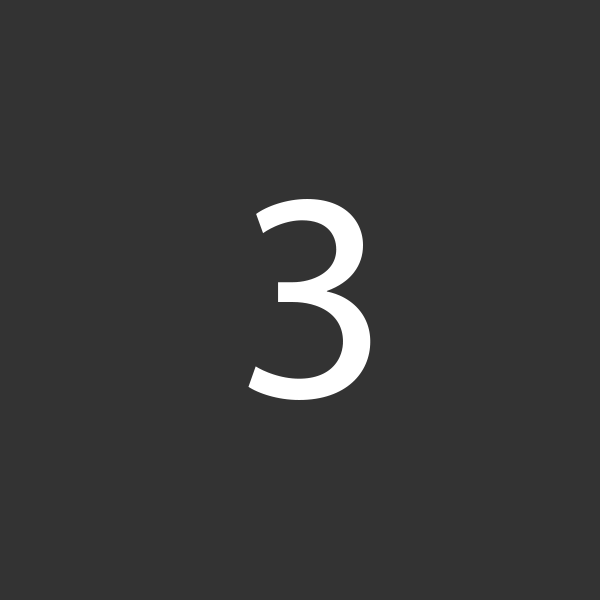
<style>
.page{position:relative;width:600px;height:600px;background:#333333}
.page>*{position:absolute;margin:0}
.t1{font:300px "MyriadPro-Regular";color:#ffffff}
</style>
<div class="page">
<p class="t1" style="left:248px;top:199px;width:123px;height:201px">3</p>
</div>
